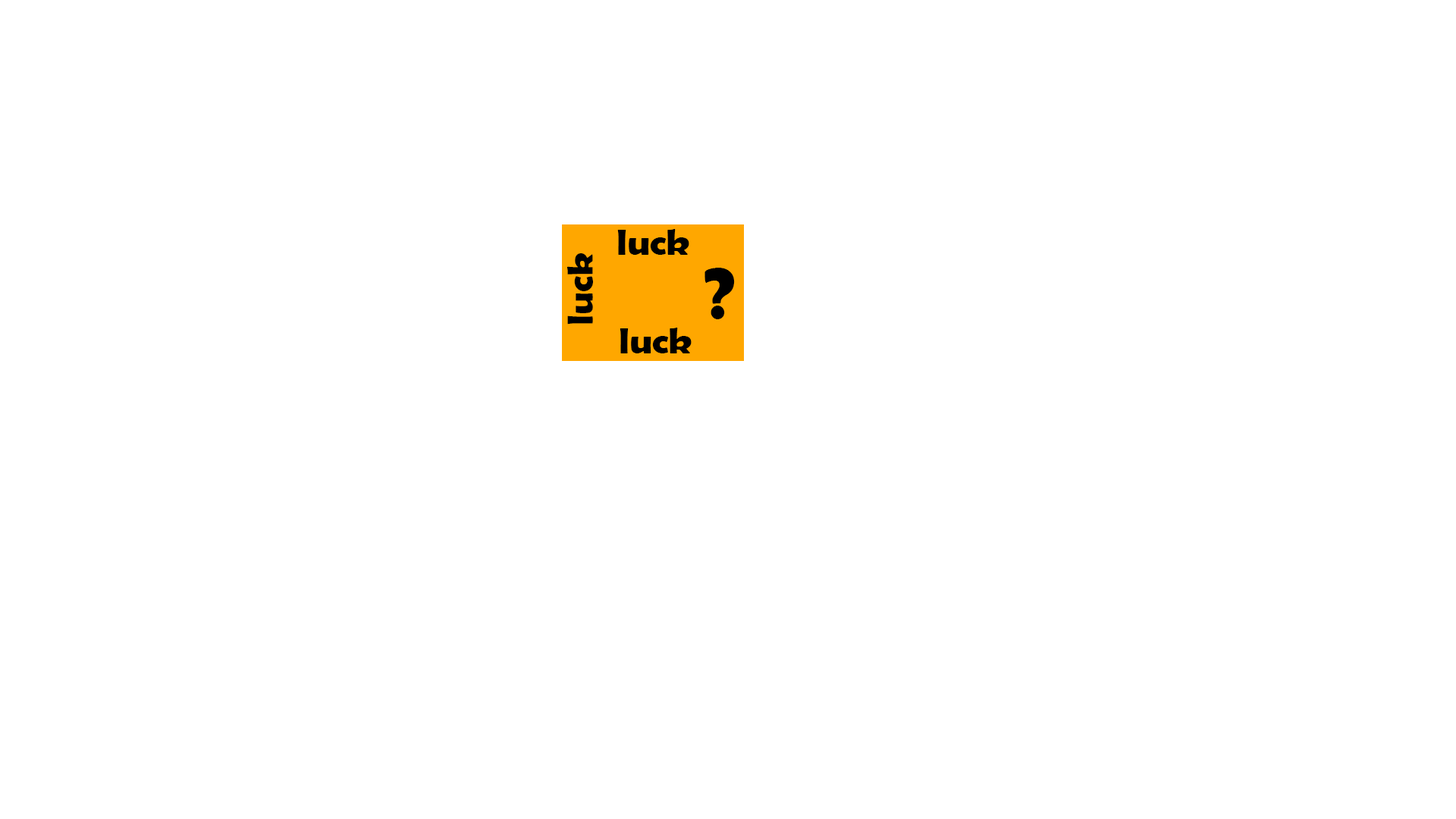
<style>
.page{position:relative;width:1456px;height:819px;background:#ffffff}
.page>*{position:absolute;margin:0}
.t1{font:36.4px "BerlinSansFBDemi-Bold";color:#000000;scale:1.08 1}
.t2{font:74.7px "BerlinSansFBDemi-Bold";color:#000000}
</style>
<div class="page">
<p class="t1" style="left:617px;top:229px;width:72px;height:26px">luck</p>
<p class="t1" style="left:567px;top:253px;width:26px;height:72px;rotate:-90deg">luck</p>
<p class="t2" style="left:704px;top:268px;width:31px;height:51px">?</p>
<p class="t1" style="left:620px;top:328px;width:72px;height:25px">luck</p>
</div>
